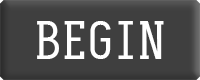
<style>
.page{position:relative;width:200px;height:80px;background:#3f3f3f}
.page>*{position:absolute;margin:0}
.t1{font:51.2px "Iosevka-Slab";color:#ffffff}
</style>
<div class="page">
<p class="t1" style="left:37px;top:21px;width:127px;height:38px">BEGIN</p>
</div>
